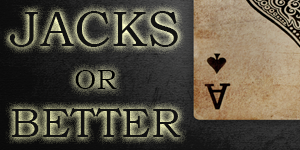
<style>
.page{position:relative;width:300px;height:150px}
.page>*{position:absolute;margin:0}
.t1{font:50px "BookmanOldStyle";color:#111111}
.t2{font:56px "BookmanOldStyle";color:#ffffff}
.t3{font:28px "BookmanOldStyle";color:#000000}
.t4{font:46px "BookmanOldStyle";color:#ffffff}
.t5{font:41px "BookmanOldStyle";color:#111111}
.t6{font:41px "BookmanOldStyle";color:#ffffff}
</style>
<div class="page">
<p class="t1" style="left:9px;top:11px;width:169px;height:36px"><span class="t2">   </span>JACKS</p>
<p class="t3" style="left:75px;top:70px;width:42px;height:19px"><span class="t4"><br></span>OR</p>
<p class="t5" style="left:11px;top:108px;width:170px;height:29px"><span class="t6">   </span>BETTER</p>
</div>
